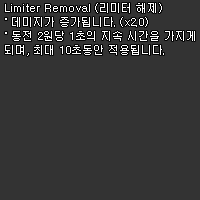
<style>
.page{position:relative;width:200px;height:200px;background:#333333}
.page>*{position:absolute;margin:0}
.t1{font:11px/14px "Dotum";color:#ffffff}
</style>
<div class="page">
<p class="t1" style="left:5px;top:3px;width:190px;height:53px">Limiter Removal (리미터 해제)<br>˚ 데미지가 증가됩니다. (x2.0)<br>˚ 동전 2원당 1초의 지속 시간을 가지게<br>되며, 최대 10초동안 적용됩니다.</p>
</div>
